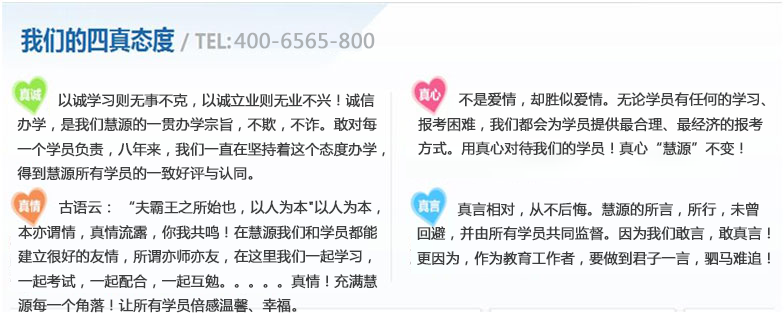
<style>
.page{position:relative;width:784px;height:314px}
.page>*{position:absolute;margin:0}
.t1{font:20px "MicrosoftYaHei";color:#acb0b3;font-weight:bold}
.t2{font:14px "MicrosoftYaHei";color:#3c3d3e;font-weight:bold}
</style>
<div class="page">
<p class="t1" style="left:234px;top:32px;width:141px;height:17px">400-6565-800</p>
<p class="t2" style="left:17px;top:93px;width:368px;height:88px">以诚学习则无事不克，以诚立业则无业不兴！诚信<br>  办学，是我们慧源的一贯办学宗旨，不欺，不诈。敢对每<br>  一个学员负责，八年来，我们一直在坚持着这个态度办学，<br>  得到慧源所有学员的一致好评与认同。</p>
<p class="t2" style="left:418px;top:92px;width:348px;height:64px">不是爱情，却胜似爱情。无论学员有任何的学习、<br>  报考困难，我们都会为学员提供最合理、最经济的报考<br>  方式。用真心对待我们的学员！真心“慧源”不变！</p>
<p class="t2" style="left:18px;top:200px;width:362px;height:113px">古语云： “夫霸王之所始也，以人为本"以人为本，<br>  本亦谓情，真情流露，你我共鸣！在慧源我们和学员都能<br>  建立很好的友情，所谓亦师亦友，在这里我们一起学习，<br>  一起考试，一起配合，一起互勉。。。。。真情！充满慧<br>  源每一个角落！让所有学员倍感温馨、幸福。</p>
<p class="t2" style="left:417px;top:202px;width:353px;height:64px">真言相对，从不后悔。慧源的所言，所行，未曾<br>  回避，并由所有学员共同监督。因为我们敢言，敢真言！<br>  更因为，作为教育工作者，要做到君子一言，驷马难追！</p>
</div>
